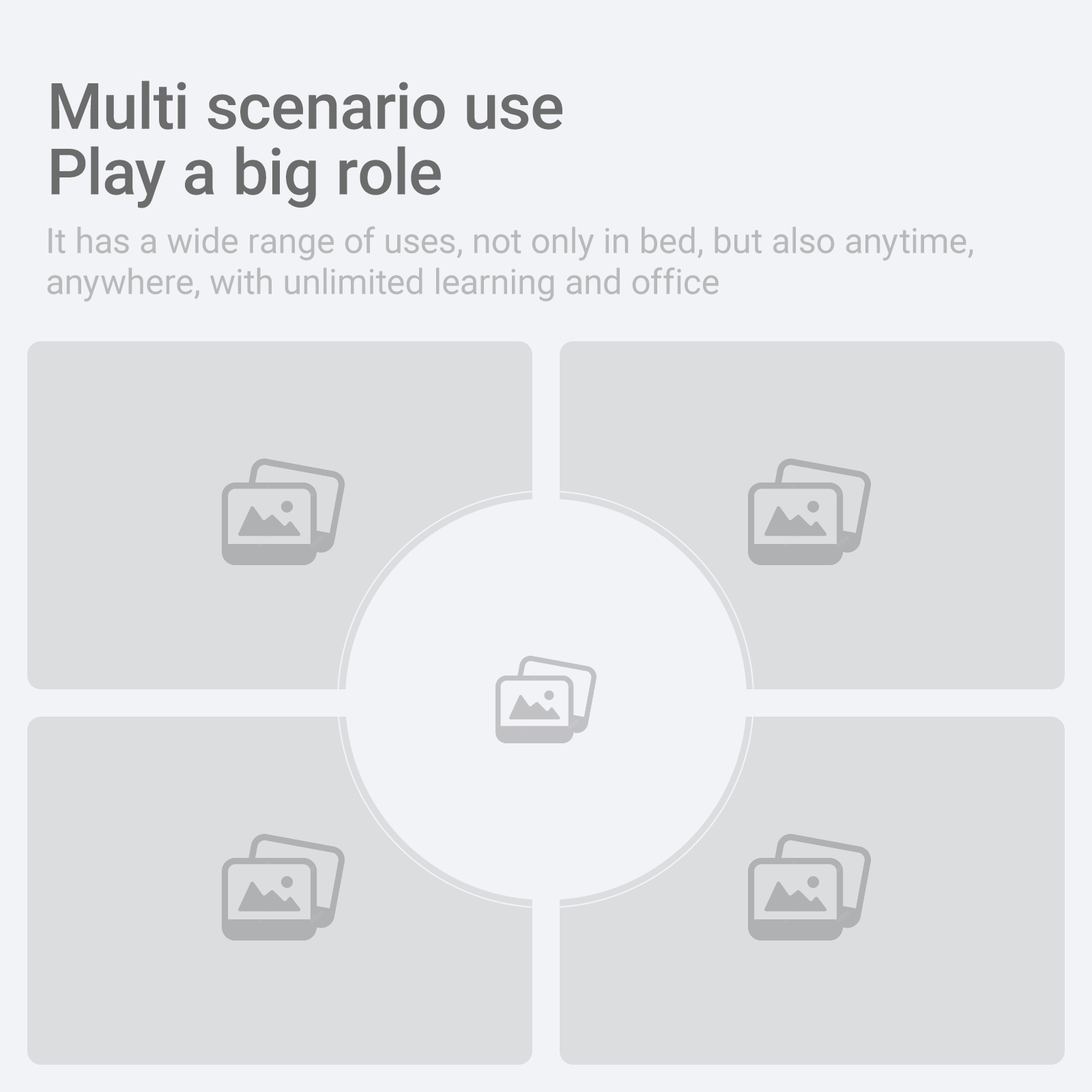
<style>
.page{position:relative;width:1092px;height:1092px;background:#f2f3f6}
.page>*{position:absolute;margin:0}
.t1{font:64.1px/65.5px "Roboto-Medium";color:#6c6c6c}
.t2{font:34.9px/40.9px "Roboto-Regular";color:#a3a3a3}
</style>
<div class="page">
<p class="t1" style="left:51px;top:81px;width:511px;height:127px">Multi scenario use<br>Play a big role</p>
<p class="t2" style="left:47px;top:226px;width:926px;height:76px;opacity:0.75">It has a wide range of uses, not only in bed, but also anytime,<br>anywhere, with unlimited learning and office</p>
</div>
